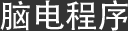
<style>
.page{position:relative;width:128px;height:31px;background:#333333}
.page>*{position:absolute;margin:0}
.t1{font:32.8px "AdobeHeitiStd-Regular";color:#ffffff}
</style>
<div class="page">
<p class="t1" style="left:0px;top:0px;width:128px;height:31px">脑电程序</p>
</div>
